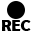
<style>
.page{position:relative;width:32px;height:32px;background:#ffffff}
.page>*{position:absolute;margin:0}
.t1{font:16px "BerlinSansFBDemi-Bold";color:#000000}
</style>
<div class="page">
<p class="t1" style="left:2px;top:20px;width:29px;height:11px">REC</p>
</div>
